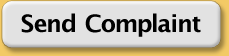
<style>
.page{position:relative;width:229px;height:56px;background:#e2e2e2}
.page>*{position:absolute;margin:0}
.t1{font:24px "LucidaGrande-Bold";color:#000000}
</style>
<div class="page">
<p class="t1" style="left:21px;top:13px;width:180px;height:24px">Send Complaint</p>
</div>
